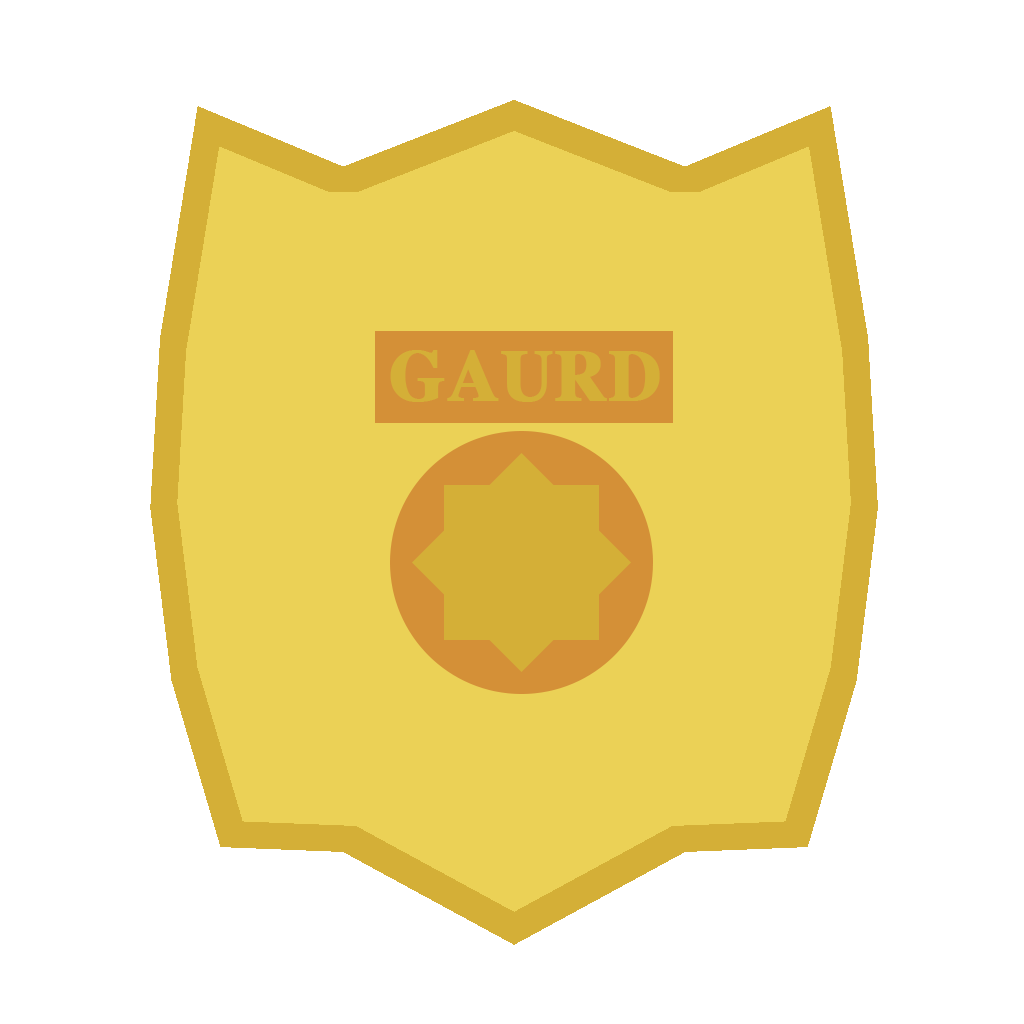
<style>
.page{position:relative;width:1024px;height:1024px;background:#ffffff}
.page>*{position:absolute;margin:0}
.t1{font:72px "Times-Bold";color:#d4af37;font-weight:bold}
</style>
<div class="page">
<p class="t1" style="left:390px;top:350px;width:270px;height:52px">GAURD</p>
</div>
